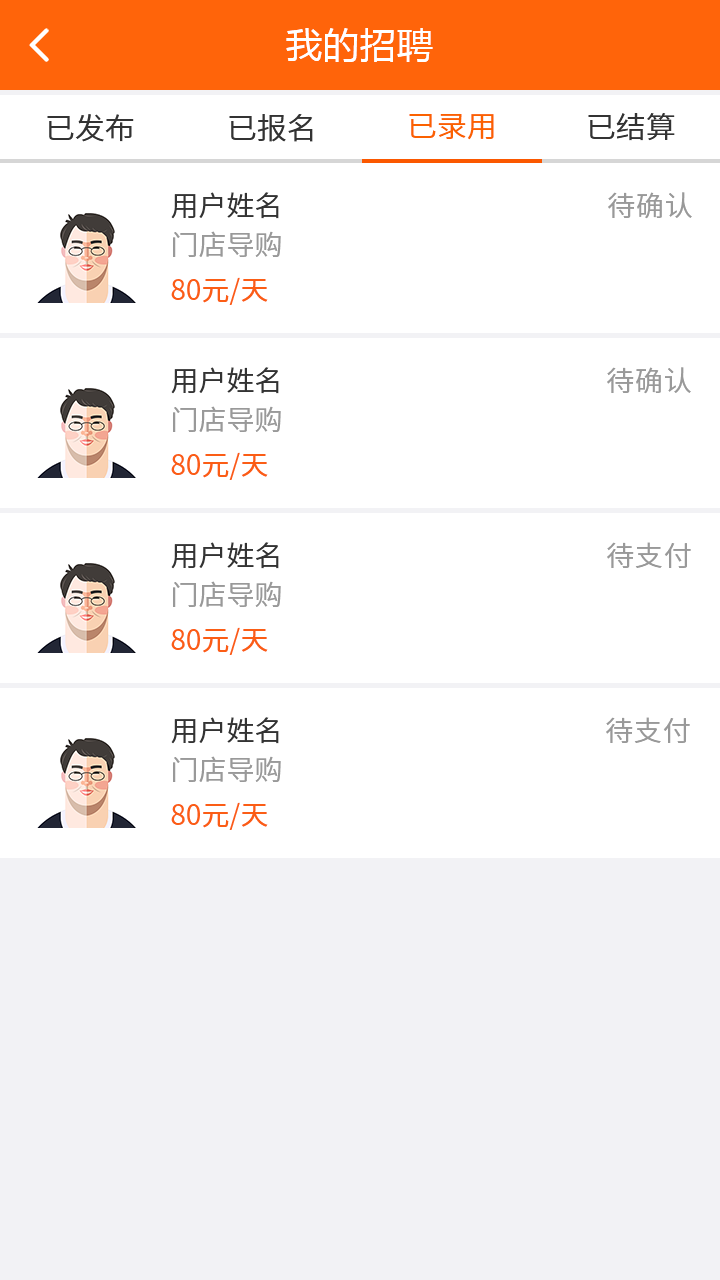
<style>
.page{position:relative;width:720px;height:1280px;background:#ffffff}
.page>*{position:absolute;margin:0}
.t1{font:36px "MicrosoftYaHei";letter-spacing:0.03em;color:#ffffff}
.t2{font:30px "NotoSansCJKsc-DemiLight";color:#fb6100;font-variant:small-caps}
.t3{font:30px "NotoSansCJKsc-DemiLight";color:#333333;font-variant:small-caps}
.t4{font:28px "NotoSansCJKsc-DemiLight";color:#333333;font-variant:small-caps}
.t5{font:28px "NotoSansCJKsc-DemiLight";letter-spacing:0.03em;color:#999999;font-variant:small-caps}
.t6{font:28px "NotoSansCJKsc-DemiLight";color:#999999;font-variant:small-caps}
.t7{font:28px "NotoSansCJKsc-Regular";color:#fb5d15;font-variant:small-caps}
</style>
<div class="page">
<p class="t1" style="left:286px;top:28px;width:147px;height:34px">我的招聘</p>
<p class="t2" style="left:409px;top:113px;width:85px;height:27px">已录用</p>
<p class="t3" style="left:588px;top:113px;width:87px;height:28px">已结算</p>
<p class="t3" style="left:47px;top:114px;width:87px;height:28px">已发布</p>
<p class="t3" style="left:229px;top:114px;width:84px;height:28px">已报名</p>
<p class="t4" style="left:171px;top:192px;width:108px;height:27px">用户姓名</p>
<p class="t5" style="left:608px;top:192px;width:84px;height:27px">待确认</p>
<p class="t6" style="left:173px;top:231px;width:108px;height:26px">门店导购</p>
<p class="t7" style="left:171px;top:277px;width:97px;height:28px">80元/天</p>
<p class="t4" style="left:171px;top:367px;width:108px;height:27px">用户姓名</p>
<p class="t5" style="left:607px;top:367px;width:84px;height:27px">待确认</p>
<p class="t6" style="left:173px;top:406px;width:108px;height:26px">门店导购</p>
<p class="t7" style="left:171px;top:452px;width:97px;height:28px">80元/天</p>
<p class="t4" style="left:171px;top:542px;width:108px;height:27px">用户姓名</p>
<p class="t5" style="left:607px;top:542px;width:84px;height:26px">待支付</p>
<p class="t6" style="left:173px;top:581px;width:108px;height:26px">门店导购</p>
<p class="t7" style="left:171px;top:627px;width:97px;height:28px">80元/天</p>
<p class="t4" style="left:171px;top:717px;width:108px;height:27px">用户姓名</p>
<p class="t5" style="left:606px;top:717px;width:84px;height:26px">待支付</p>
<p class="t6" style="left:173px;top:756px;width:108px;height:26px">门店导购</p>
<p class="t7" style="left:171px;top:802px;width:97px;height:28px">80元/天</p>
</div>
